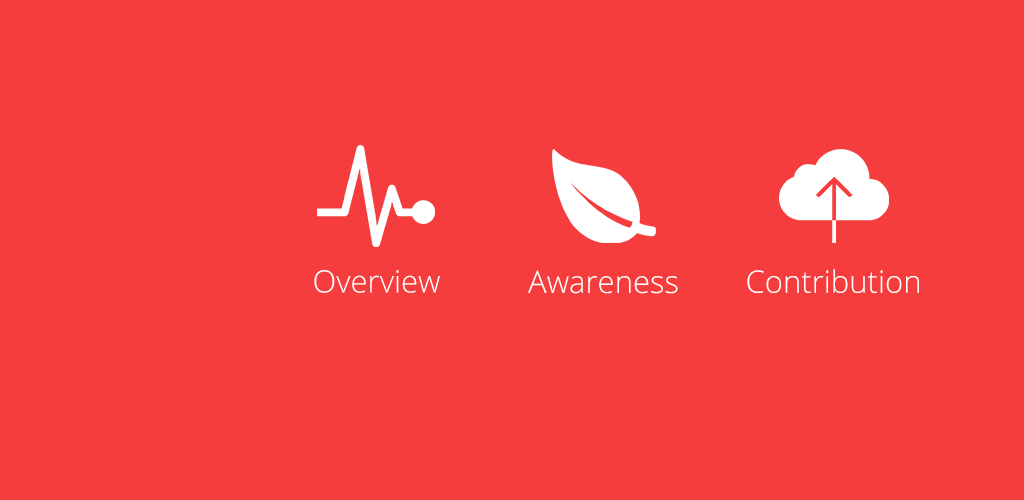
<style>
.page{position:relative;width:1024px;height:500px;background:#f53d3d}
.page>*{position:absolute;margin:0}
.t1{font:31px "OpenSans-Light";color:#ffffff}
.t2{font:31.2px "OpenSans-Light";color:#ffffff}
.t3{font:31.1px "OpenSans-Light";color:#ffffff}
</style>
<div class="page">
<p class="t1" style="left:314px;top:270px;width:126px;height:23px">Overview</p>
<p class="t2" style="left:528px;top:270px;width:150px;height:24px">Awareness</p>
<p class="t3" style="left:747px;top:269px;width:172px;height:24px">Contribution</p>
</div>
